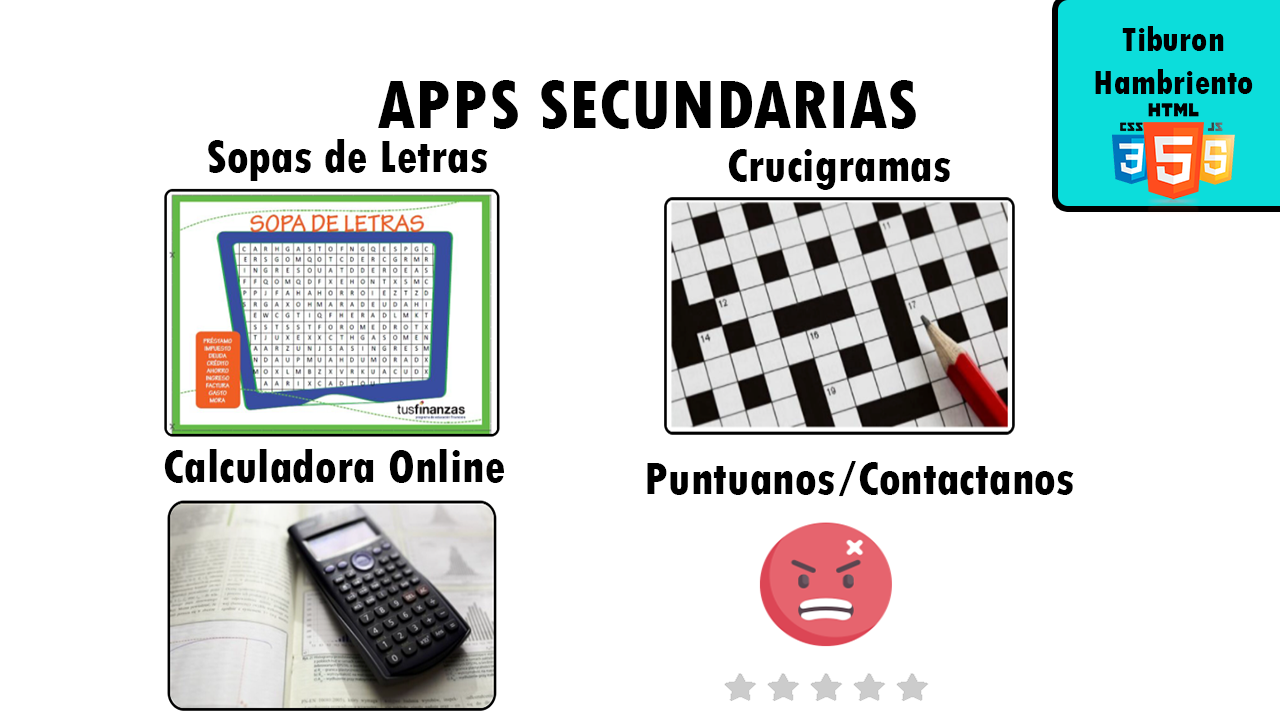
<style>
.page{position:relative;width:1280px;height:720px;background:#ffffff}
.page>*{position:absolute;margin:0}
.t1{font:36px "TwCenMT-CondensedExtraBold";color:#000000}
.t2{font:72px "TwCenMT-CondensedExtraBold";color:#000000}
.t3{font:48px "TwCenMT-CondensedExtraBold";color:#000000}
</style>
<div class="page">
<p class="t1" style="left:1095px;top:26px;width:158px;height:68px;text-align:center">Tiburon<br>Hambriento</p>
<p class="t2" style="left:378px;top:80px;width:538px;height:49px">APPS SECUNDARIAS</p>
<p class="t3" style="left:208px;top:139px;width:280px;height:42px">Sopas de Letras</p>
<p class="t3" style="left:728px;top:149px;width:223px;height:41px">Crucigramas</p>
<p class="t3" style="left:164px;top:449px;width:340px;height:34px">Calculadora Online</p>
<p class="t3" style="left:647px;top:461px;width:427px;height:42px">Puntuanos/Contactanos</p>
</div>
